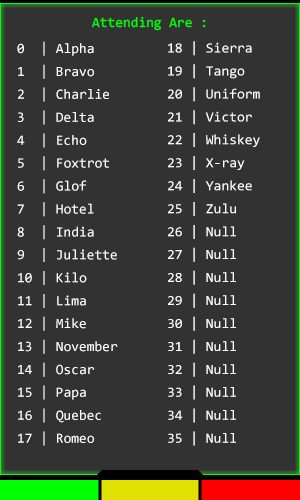
<style>
.page{position:relative;width:300px;height:500px;background:#323232}
.page>*{position:absolute;margin:0}
.t1{font:14.3px "Consolas";color:#00ff00}
.t2{font:14.1px "Consolas";color:#ffffff}
</style>
<div class="page">
<p class="t1" style="left:92px;top:16px;width:114px;height:15px">Attending Are :</p>
<p class="t2" style="left:17px;top:41px;width:101px;height:405px">0  | Alpha<br><br>1  | Bravo<br><br>2  | Charlie<br><br>3  | Delta<br><br>4  | Echo<br><br>5  | Foxtrot<br><br>6  | Glof<br><br>7  | Hotel<br><br>8  | India<br><br>9  | Juliette<br><br>10 | Kilo<br><br>11 | Lima<br><br>12 | Mike<br><br>13 | November<br><br>14 | Oscar<br><br>15 | Papa<br><br>16 | Quebec<br><br>17 | Romeo</p>
<p class="t2" style="left:168px;top:41px;width:92px;height:405px">18 | Sierra<br><br>19 | Tango<br><br>20 | Uniform<br><br>21 | Victor<br><br>22 | Whiskey<br><br>23 | X-ray<br><br>24 | Yankee<br><br>25 | Zulu<br><br>26 | Null<br><br>27 | Null<br><br>28 | Null<br><br>29 | Null<br><br>30 | Null<br><br>31 | Null<br><br>32 | Null<br><br>33 | Null<br><br>34 | Null<br><br>35 | Null</p>
</div>
